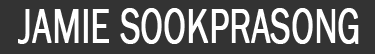
<style>
.page{position:relative;width:375px;height:54px;background:#333333}
.page>*{position:absolute;margin:0}
.t1{font:49.8px "FranklinGothic-Book";color:#ffffff;font-weight:bold;scale:0.7 1}
</style>
<div class="page">
<p class="t1" style="left:18px;top:8px;width:341px;height:36px">JAMIE SOOKPRASONG</p>
</div>
